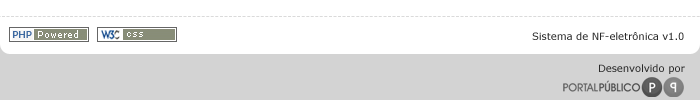
<style>
.page{position:relative;width:700px;height:100px;background:#ffffff}
.page>*{position:absolute;margin:0}
.t1{font:10px "Verdana";color:#282828}
</style>
<div class="page">
<p class="t1" style="left:532px;top:32px;width:152px;height:8px">Sistema de NF-eletrônica v1.0</p>
<p class="t1" style="left:599px;top:64px;width:86px;height:10px">Desenvolvido por</p>
</div>
